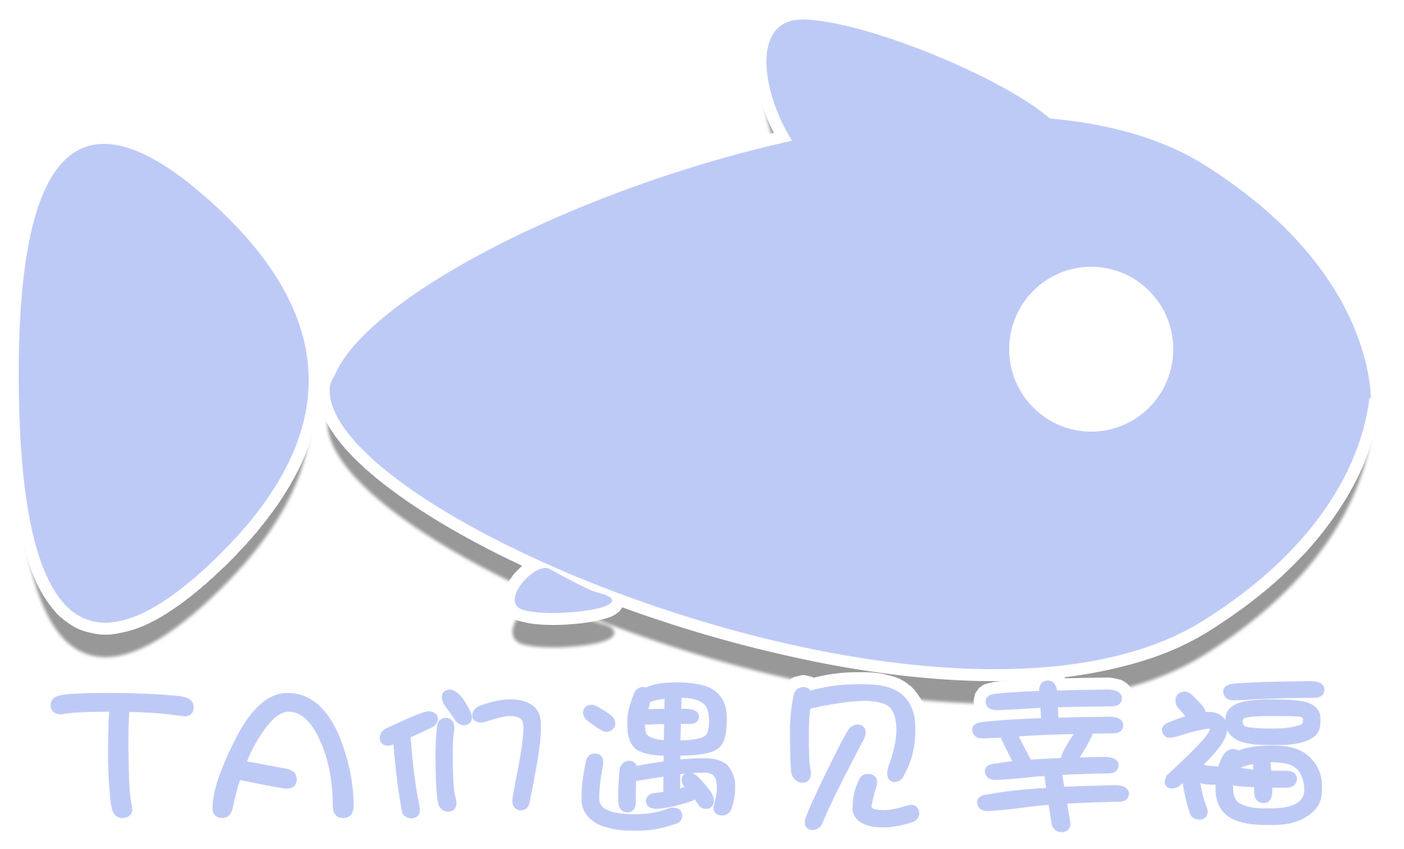
<style>
.page{position:relative;width:1404px;height:849px;background:#becaf6}
.page>*{position:absolute;margin:0}
.t1{font:168.7px "DFPShaoNvW5";letter-spacing:0.06em;color:#becaf6;text-transform:uppercase;font-weight:bold;scale:1.07 1}
.t2{font:181.2px "DFPShaoNvW5";letter-spacing:0.06em;color:#becaf6;text-transform:uppercase;font-weight:bold;scale:1.07 1}
</style>
<div class="page">
<p class="t1" style="left:50px;top:680px;width:1275px;height:153px"><span class="t2">ta</span>们遇见幸福</p>
</div>
